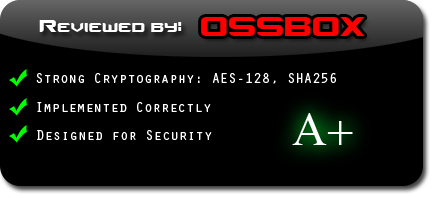
<style>
.page{position:relative;width:435px;height:198px;background:#000000}
.page>*{position:absolute;margin:0}
.t1{font:38px "Counter-StrikeRegular";color:#ff0000}
.t2{font:24px "Counter-StrikeRegular";color:#ffffff}
.t3{font:14px "OratorStd";color:#ffffff}
</style>
<div class="page">
<p class="t1" style="left:201px;top:17px;width:164px;height:19px">OSSBOX</p>
<p class="t2" style="left:39px;top:20px;width:143px;height:12px">Reviewed by:</p>
<p class="t3" style="left:36px;top:73px;width:300px;height:11px">Strong Cryptography: AES-128, SHA256</p>
<p class="t3" style="left:37px;top:102px;width:174px;height:10px">Implemented Correctly</p>
<p class="t3" style="left:37px;top:130px;width:175px;height:10px">Designed for Security</p>
</div>
